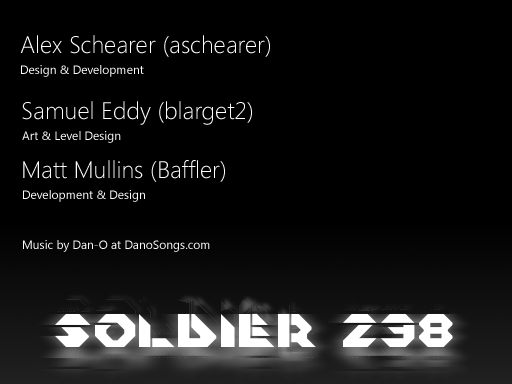
<style>
.page{position:relative;width:512px;height:384px;background:#000000}
.page>*{position:absolute;margin:0}
.t1{font:24px "SegoeUI-Light";color:#ffffff}
.t2{font:12px "SegoeUI";color:#ffffff}
</style>
<div class="page">
<p class="t1" style="left:20px;top:35px;width:250px;height:22px">Alex Schearer (aschearer)</p>
<p class="t2" style="left:21px;top:65px;width:123px;height:12px">Design &amp; Development</p>
<p class="t1" style="left:22px;top:101px;width:230px;height:24px">Samuel Eddy (blarget2)</p>
<p class="t2" style="left:22px;top:131px;width:99px;height:12px">Art &amp; Level Design</p>
<p class="t1" style="left:23px;top:160px;width:202px;height:22px">Matt Mullins (Baffler)</p>
<p class="t2" style="left:23px;top:190px;width:122px;height:12px">Development &amp; Design</p>
<p class="t2" style="left:23px;top:240px;width:187px;height:12px">Music by Dan-O at DanoSongs.com</p>
</div>
